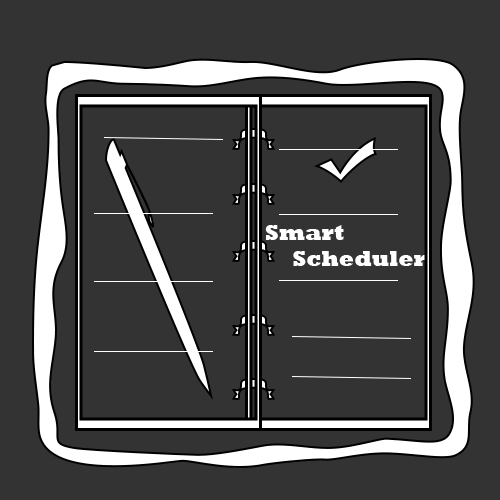
<style>
.page{position:relative;width:500px;height:500px;background:#333333}
.page>*{position:absolute;margin:0}
.t1{font:22px "Rockwell-ExtraBold";color:#ffffff}
</style>
<div class="page">
<p class="t1" style="left:265px;top:225px;width:161px;height:41px">Smart<br>     Scheduler</p>
</div>
